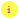
<style>
.page{position:relative;width:19px;height:19px;background:#f9fb50}
.page>*{position:absolute;margin:0}
.t1{font:10px "Georgia";color:#cf5959}
</style>
<div class="page">
<p class="t1" style="left:7px;top:6px;width:4px;height:7px">i</p>
</div>
